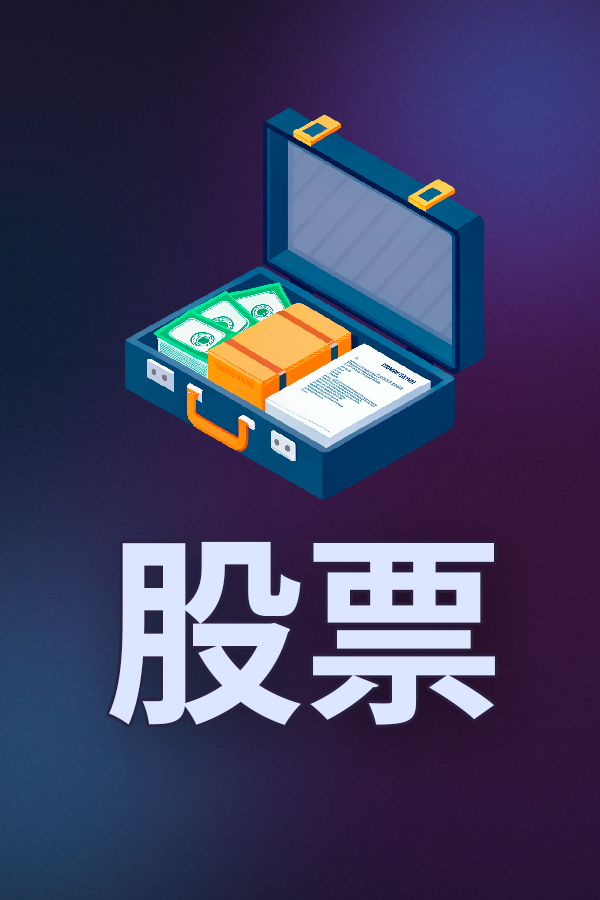
<style>
.page{position:relative;width:600px;height:900px}
.page>*{position:absolute;margin:0}
.t1{font:199.3px "KozGoPr6N-Bold";color:#dde6ff}
</style>
<div class="page">
<p class="t1" style="left:109px;top:541px;width:386px;height:184px">股票</p>
</div>
